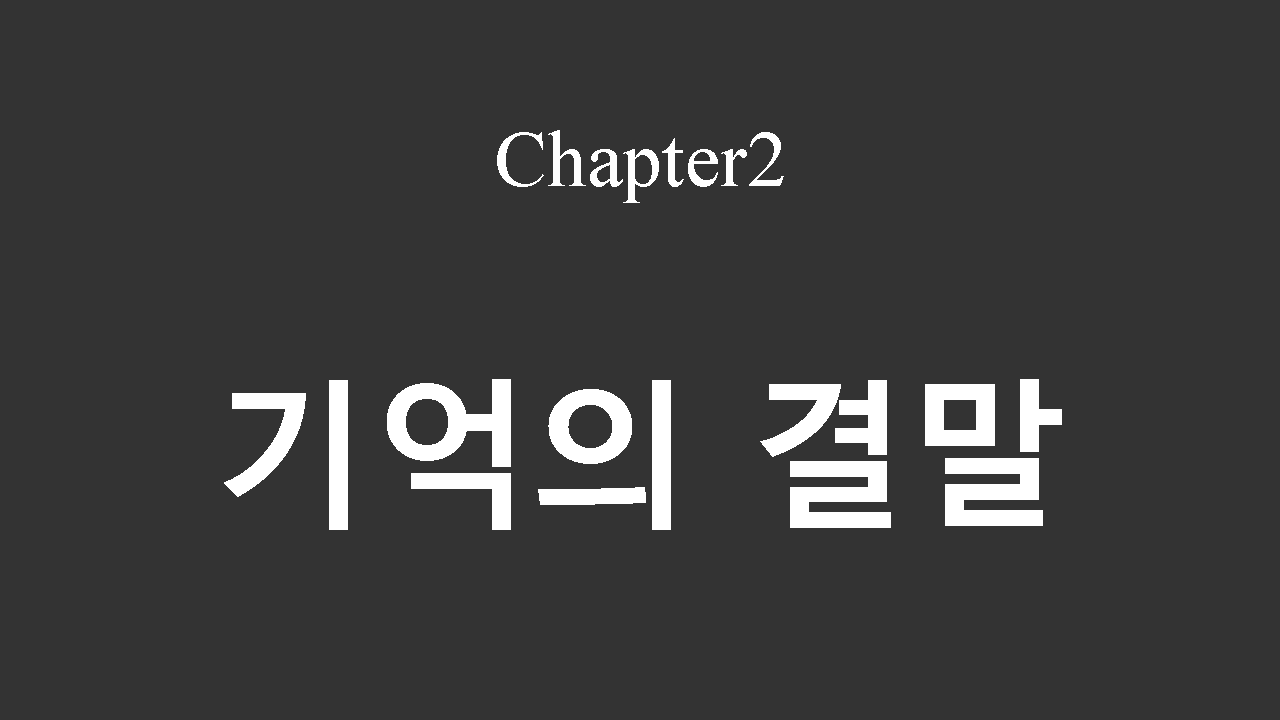
<style>
.page{position:relative;width:1280px;height:720px;background:#333333}
.page>*{position:absolute;margin:0}
.t1{font:80px "TimesNewRomanPSMT";color:#ffffff}
.t2{font:160px "MalgunGothicBold";color:#ffffff}
</style>
<div class="page">
<p class="t1" style="left:497px;top:130px;width:287px;height:73px">Chapter2</p>
<p class="t2" style="left:224px;top:379px;width:838px;height:151px">기억의 결말</p>
</div>
